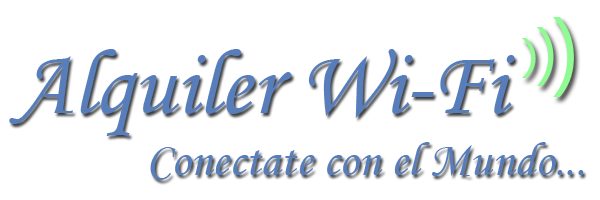
<style>
.page{position:relative;width:600px;height:200px;background:#ffffff}
.page>*{position:absolute;margin:0}
.t1{font:93.3px "MonotypeCorsiva";color:#587dbb}
.t2{font:48px "MonotypeCorsiva";color:#587dbb}
</style>
<div class="page">
<p class="t1" style="left:9px;top:49px;width:506px;height:87px">Alquiler Wi-Fi</p>
<p class="t2" style="left:150px;top:142px;width:434px;height:38px">Conectate con el Mundo...</p>
</div>
